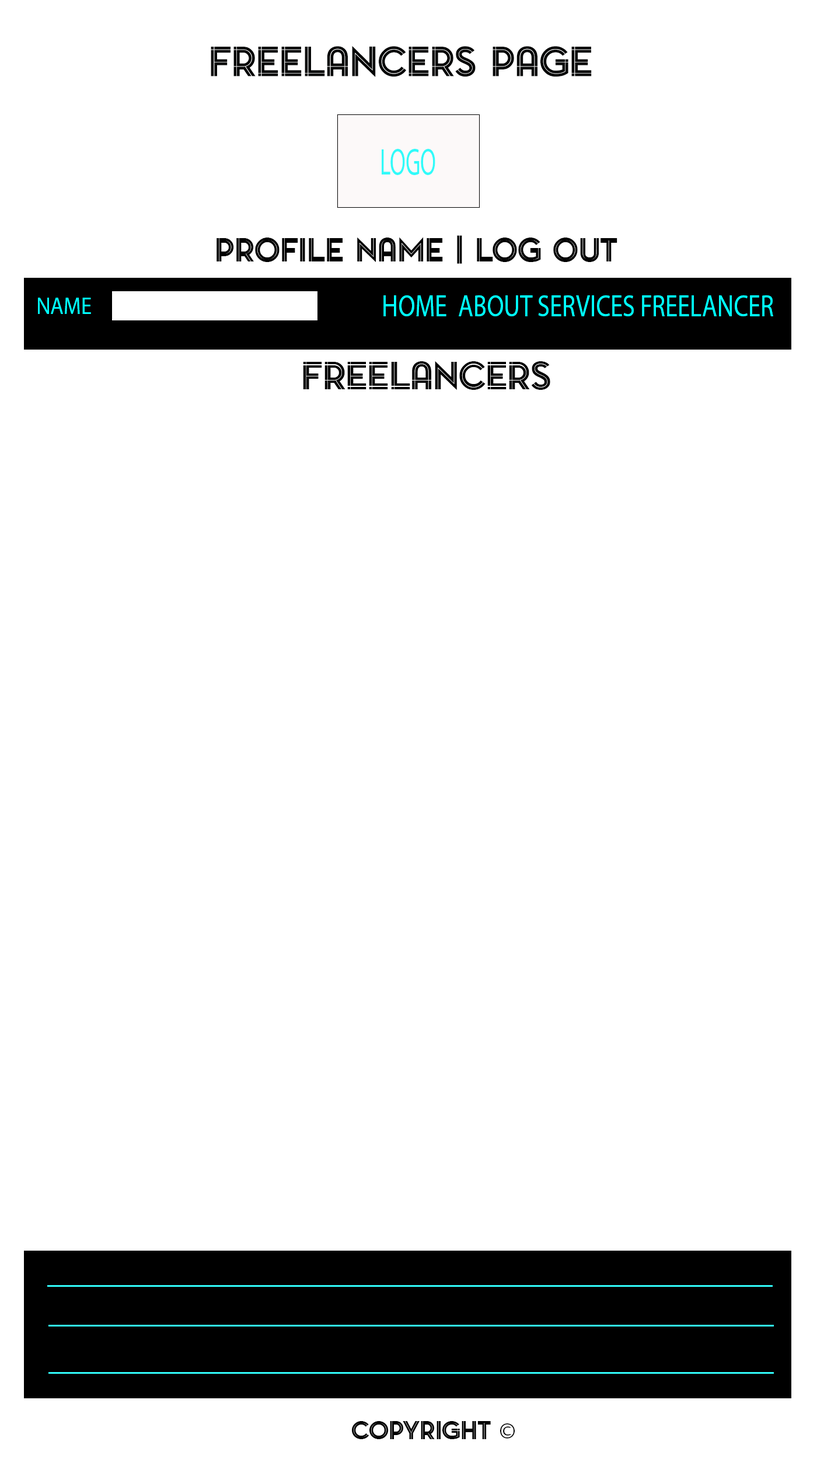
<style>
.page{position:relative;width:817px;height:1459px;background:#ffffff}
.page>*{position:absolute;margin:0}
.t1{font:39.4px "PontiacInlineRegular";color:#030404}
.t2{font:37.6px "MyriadPro-Regular";color:#31fbfa;scale:0.61 1}
.t3{font:31.6px "PontiacInlineRegular";color:#000000}
.t4{font:23.8px "MyriadPro-Regular";color:#00ffff;scale:0.91 1}
.t5{font:30.9px "MyriadPro-Regular";color:#00ffff;scale:0.81 1}
.t6{font:36.5px "PontiacInlineRegular";color:#000000}
.t7{font:24.3px "PontiacInlineRegular";color:#000000}
.t8{font:24.3px "MyriadPro-Regular";color:#000000}
</style>
<div class="page">
<p class="t1" style="left:211px;top:46px;width:381px;height:31px">Freelancers Page</p>
<p class="t2" style="left:382px;top:149px;width:53px;height:26px">LOGO</p>
<p class="t3" style="left:217px;top:235px;width:401px;height:29px">Profile Name | Log Out</p>
<p class="t4" style="left:38px;top:298px;width:53px;height:16px">NAME</p>
<p class="t5" style="left:383px;top:295px;width:390px;height:21px">HOME  ABOUT SERVICES FREELANCER</p>
<p class="t6" style="left:303px;top:361px;width:247px;height:29px">FREELANCERS</p>
<p class="t7" style="left:352px;top:1421px;width:163px;height:18px">COPYRIGHT <span class="t8">©</span></p>
</div>
